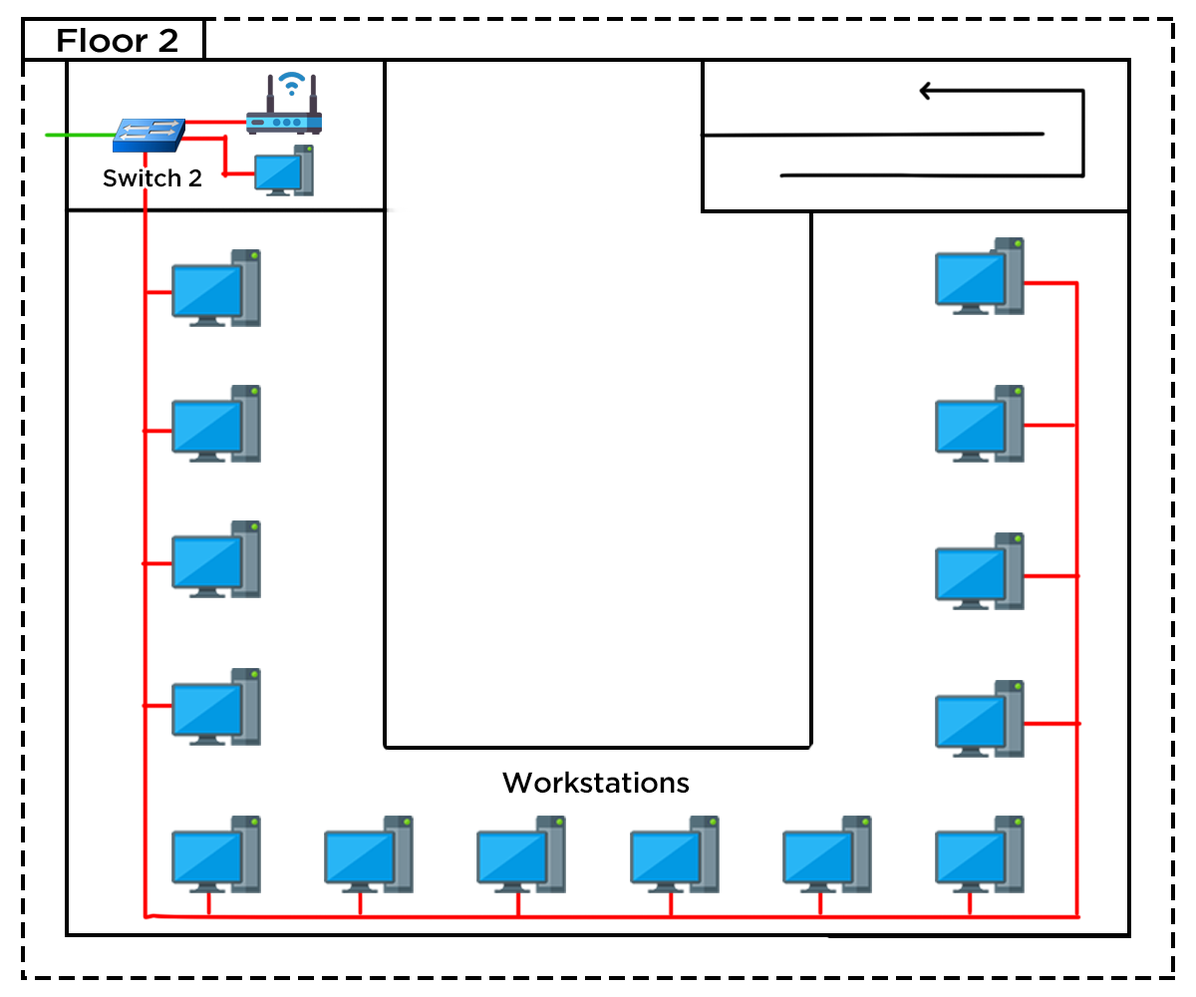
<style>
.page{position:relative;width:1196px;height:997px;background:#ffffff}
.page>*{position:absolute;margin:0}
.t1{font:32.8px "iCielGotham-Medium";letter-spacing:-0.02em;color:#000000;scale:1.1 1}
.t2{font:24.2px "iCielGotham-Medium";letter-spacing:-0.02em;color:#000000}
.t3{font:28.9px "iCielGotham-Medium";letter-spacing:-0.02em;color:#000000}
</style>
<div class="page">
<p class="t1" style="left:58px;top:28px;width:119px;height:25px">Floor 2</p>
<p class="t2" style="left:103px;top:168px;width:98px;height:19px">Switch 2</p>
<p class="t3" style="left:502px;top:771px;width:188px;height:22px">Workstations</p>
</div>
